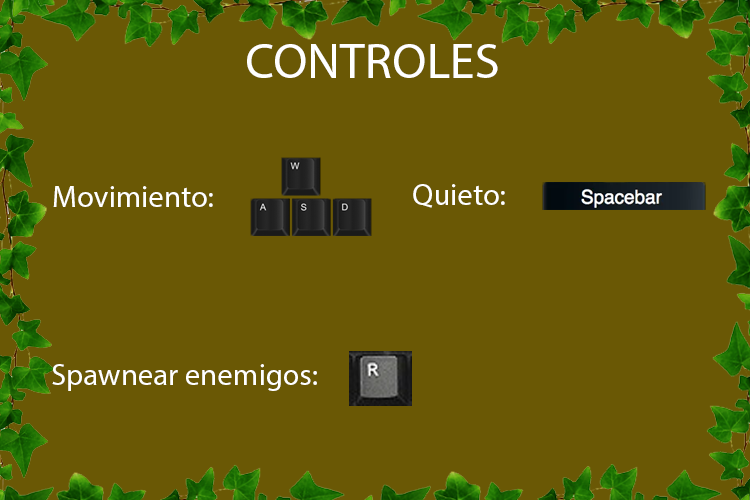
<style>
.page{position:relative;width:750px;height:500px;background:#6a5805}
.page>*{position:absolute;margin:0}
.t1{font:50px "MyriadPro-Regular";color:#ffffff}
.t2{font:30.8px "MyriadPro-Regular";color:#ffffff}
</style>
<div class="page">
<p class="t1" style="left:247px;top:44px;width:251px;height:34px">CONTROLES</p>
<p class="t2" style="left:413px;top:184px;width:92px;height:24px">Quieto:</p>
<p class="t2" style="left:53px;top:186px;width:160px;height:21px">Movimiento:</p>
<p class="t2" style="left:52px;top:364px;width:265px;height:27px">Spawnear enemigos:</p>
</div>
